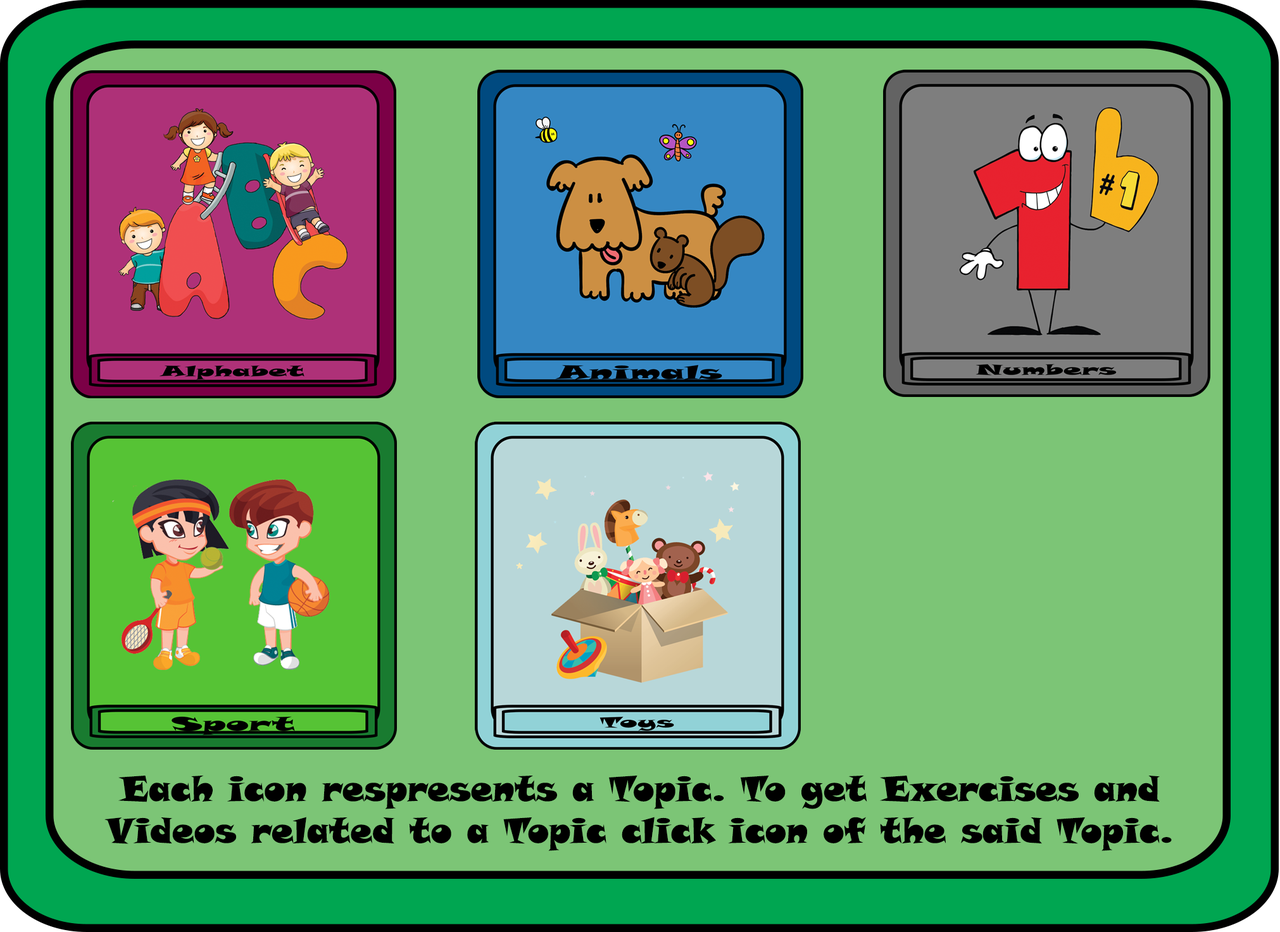
<style>
.page{position:relative;width:1280px;height:932px;background:#7cc576}
.page>*{position:absolute;margin:0}
.t1{font:34.8px "SnapITC-Regular";color:#000000}
</style>
<div class="page">
<p class="t1" style="left:104px;top:775px;width:1068px;height:76px;text-align:center">Each icon respresents a Topic. To get Exercises and Videos related to a Topic click icon of the said Topic.</p>
</div>
